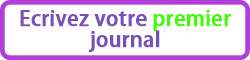
<style>
.page{position:relative;width:250px;height:60px;background:#ffffff}
.page>*{position:absolute;margin:0}
.t1{font:20.8px/20.8px "AdobeFanHeitiStd-Bold";color:#794fb8;font-weight:bold}
.t2{font:20.8px/20.8px "AdobeFanHeitiStd-Bold";color:#3ffd00;font-weight:bold}
</style>
<div class="page">
<p class="t1" style="left:20px;top:10px;width:211px;height:43px;text-align:center">Ecrivez votre <span class="t2">premier<br></span>journal</p>
</div>
